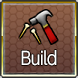
<style>
.page{position:relative;width:78px;height:78px}
.page>*{position:absolute;margin:0}
.t1{font:18px "UDShinGoPro-Regular";letter-spacing:-0.04em;color:#ffffff;scale:0.9 1}
</style>
<div class="page">
<p class="t1" style="left:21px;top:50px;width:36px;height:16px">Build</p>
</div>
